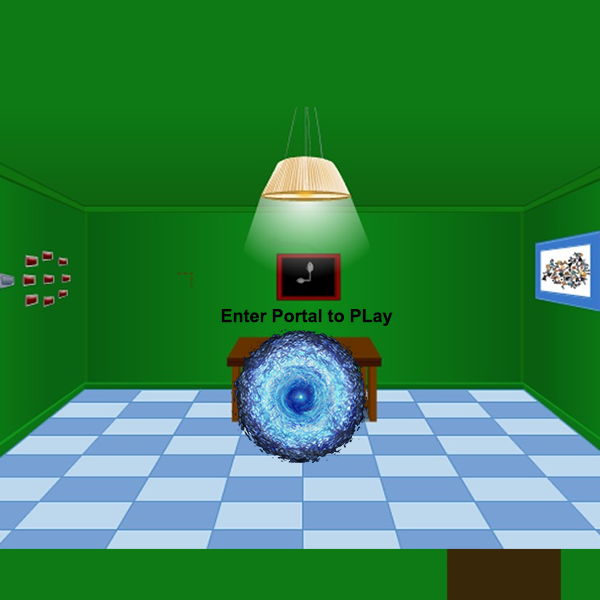
<style>
.page{position:relative;width:600px;height:600px;background:#0e7a15}
.page>*{position:absolute;margin:0}
.t1{font:18px "Arial-BoldMT";color:#050505}
</style>
<div class="page">
<p class="t1" style="left:221px;top:309px;width:172px;height:17px">Enter Portal to PLay</p>
</div>
